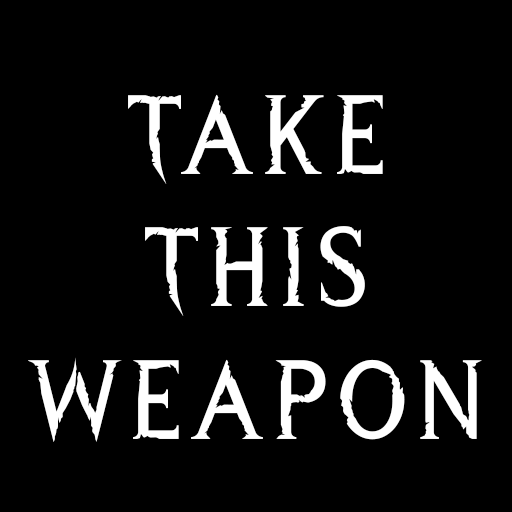
<style>
.page{position:relative;width:512px;height:512px;background:#000000}
.page>*{position:absolute;margin:0}
.t1{font:110.8px "WreckedShipRegular";letter-spacing:0.05em;color:#ffffff}
</style>
<div class="page">
<p class="t1" style="left:28px;top:94px;width:454px;height:348px;text-align:center">Take<br>This<br>Weapon</p>
</div>
